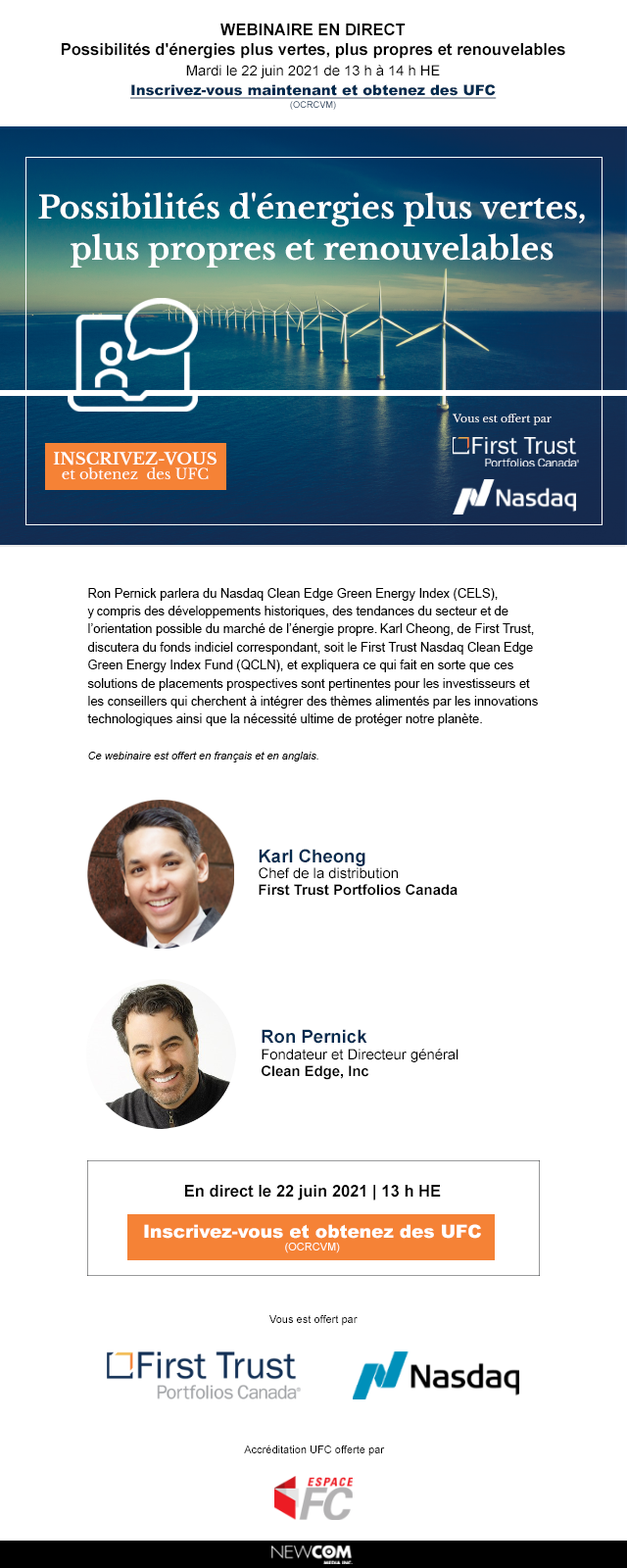
<style>
.page{position:relative;width:627px;height:1568px;background:#ffffff}
.page>*{position:absolute;margin:0}
.t1{font:16.2px/19.8px "Arial-BoldMT";color:#000000}
.t2{font:16.2px/21.6px "Arial-BoldMT";color:#000000}
.t3{font:14.4px/19.8px "ArialMT";color:#000000}
.t4{font:14.4px/19.8px "Arial-Black";color:#002a4e;text-decoration:underline}
.t5{font:9px/12.6px "ArialMT";color:#002a4e}
.t6{font:31.4px/41.2px "LibreBaskerville-Bold";color:#ffffff}
.t7{font:10.7px "LibreBaskerville-Regular";color:#ffffff}
.t8{font:14.4px/15.3px "LibreBaskerville-Regular";color:#ffffff}
.t9{font:16.2px/15.3px "LibreBaskerville-Bold";color:#ffffff}
.t10{font:12.6px/18px "ArialMT";color:#000000}
.t11{font:10.8px/18px "Arial-ItalicMT";color:#000000}
.t12{font:14.4px/16.2px "Arial-BoldMT";color:#000000}
.t13{font:18px/16.2px "Arial-BoldMT";color:#002a4e}
.t14{font:14.4px/16.2px "ArialMT";color:#000000}
.t15{font:16.2px "Arial-BoldMT";color:#000000}
.t16{font:18px/12.6px "Arial-Black";color:#ffffff}
.t17{font:10.8px/12.6px "ArialMT";color:#ffffff}
.t18{font:10.8px "ArialMT";color:#000000}
</style>
<div class="page">
<p class="t1" style="left:62px;top:23px;width:503px;height:87px;text-align:center"><span class="t2">WEBINAIRE EN DIRECT<br></span>Possibilités d'énergies plus vertes, plus propres et renouvelables<br><span class="t3">Mardi le 22 juin 2021 de 13 h à 14 h HE<br></span><span class="t4">Inscrivez-vous maintenant et obtenez des UFC<br></span><span class="t5">(OCRCVM)</span></p>
<p class="t6" style="left:38px;top:192px;width:547px;height:76px;text-align:center">Possibilités d'énergies plus vertes,<br>plus propres et renouvelables</p>
<p class="t7" style="left:453px;top:414px;width:99px;height:11px">Vous est offert par</p>
<p class="t8" style="left:53px;top:452px;width:164px;height:28px;text-align:center"><span class="t9">INSCRIVEZ-VOUS<br></span>et obtenez  des UFC</p>
<p class="t10" style="left:87px;top:588px;width:451px;height:174px">Ron Pernick parlera du Nasdaq Clean Edge Green Energy Index (CELS),<br>y compris des développements historiques, des tendances du secteur et de<br>l’orientation possible du marché de l’énergie propre. Karl Cheong, de First Trust,<br>discutera du fonds indiciel correspondant, soit le First Trust Nasdaq Clean Edge<br>Green Energy Index Fund (QCLN), et expliquera ce qui fait en sorte que ces<br>solutions de placements prospectives sont pertinentes pour les investisseurs et<br>les conseillers qui cherchent à intégrer des thèmes alimentés par les innovations<br>technologiques ainsi que la nécessité ultime de protéger notre planète.<br><br><span class="t11">Ce webinaire est offert en français et en anglais.</span></p>
<p class="t12" style="left:259px;top:849px;width:199px;height:47px"><span class="t13">Karl Cheong<br></span><span class="t14">Chef de la distribution<br></span>First Trust Portfolios Canada</p>
<p class="t14" style="left:262px;top:1029px;width:197px;height:51px"><span class="t13">Ron Pernick<br></span>Fondateur et Directeur général<br><span class="t12">Clean Edge, Inc</span></p>
<p class="t15" style="left:185px;top:1185px;width:256px;height:15px">En direct le 22 juin 2021 | 13 h HE</p>
<p class="t16" style="left:144px;top:1224px;width:337px;height:29px;text-align:center">Inscrivez-vous et obtenez des UFC<br><span class="t17">(OCRCVM)</span></p>
<p class="t18" style="left:270px;top:1315px;width:88px;height:11px">Vous est offert par</p>
<p class="t18" style="left:244px;top:1445px;width:141px;height:11px">Accréditation UFC offerte par</p>
</div>
